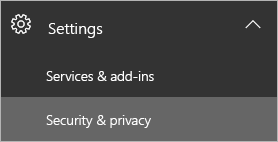
<style>
.page{position:relative;width:278px;height:142px;background:#333333}
.page>*{position:absolute;margin:0}
.t1{font:16px "SegoeUI-Semilight";color:#ffffff}
.t2{font:13.6px "SegoeUI-Semilight";color:#ffffff}
.t3{font:13.7px "SegoeUI-Semilight";color:#ffffff}
</style>
<div class="page">
<p class="t1" style="left:48px;top:23px;width:55px;height:15px">Settings</p>
<p class="t2" style="left:46px;top:71px;width:108px;height:10px">Services &amp; add-ins</p>
<p class="t3" style="left:46px;top:115px;width:105px;height:13px">Security &amp; privacy</p>
</div>
